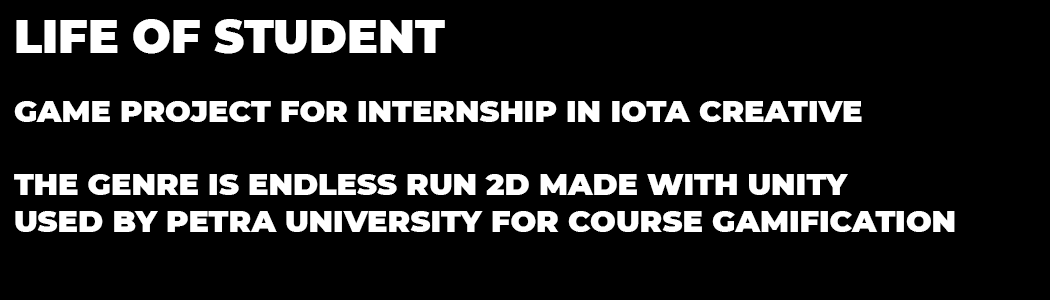
<style>
.page{position:relative;width:1050px;height:300px;background:#000000}
.page>*{position:absolute;margin:0}
.t1{font:45.8px "Montserrat-Black";color:#ffffff}
.t2{font:30.4px "Montserrat-Black";color:#ffffff}
</style>
<div class="page">
<p class="t1" style="left:16px;top:19px;width:429px;height:35px">LIFE OF STUDENT</p>
<p class="t2" style="left:14px;top:101px;width:941px;height:131px">GAME PROJECT FOR INTERNSHIP IN IOTA CREATIVE<br><br>THE GENRE IS ENDLESS RUN 2D MADE WITH UNITY<br>USED BY PETRA UNIVERSITY FOR COURSE GAMIFICATION</p>
</div>
